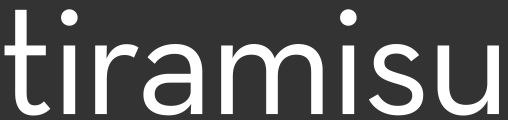
<style>
.page{position:relative;width:508px;height:120px;background:#333333}
.page>*{position:absolute;margin:0}
.t1{font:165.4px "NeutraText-Book";letter-spacing:-0.025em;color:#ffffff}
</style>
<div class="page">
<p class="t1" style="left:4px;top:9px;width:495px;height:107px">tiramisu</p>
</div>
